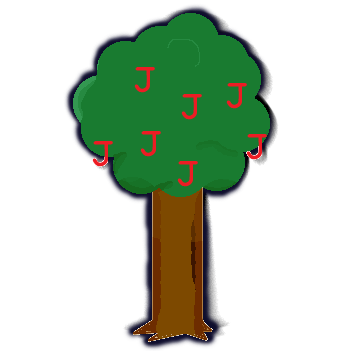
<style>
.page{position:relative;width:351px;height:351px;background:#ffffff}
.page>*{position:absolute;margin:0}
.t1{font:36px "Chalkboard";color:#ed1c24}
</style>
<div class="page">
<p class="t1" style="left:246px;top:134px;width:21px;height:26px">J</p>
</div>
